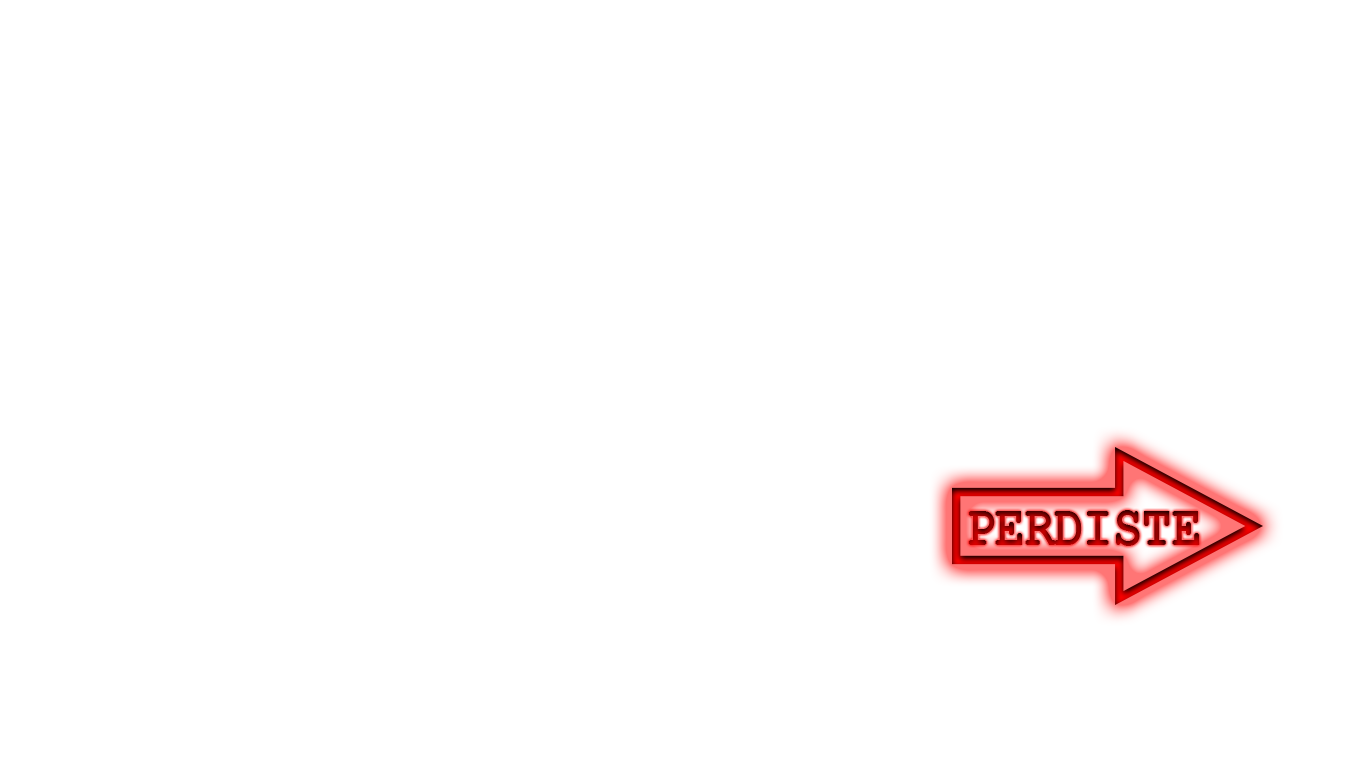
<style>
.page{position:relative;width:1366px;height:768px;background:#ffffff}
.page>*{position:absolute;margin:0}
.t1{font:58.3px "CourierNewPS-BoldMT";scale:0.84 1}
</style>
<div class="page">
<p class="t1" style="left:968px;top:510px;width:232px;height:36px">PERDISTE</p>
</div>
